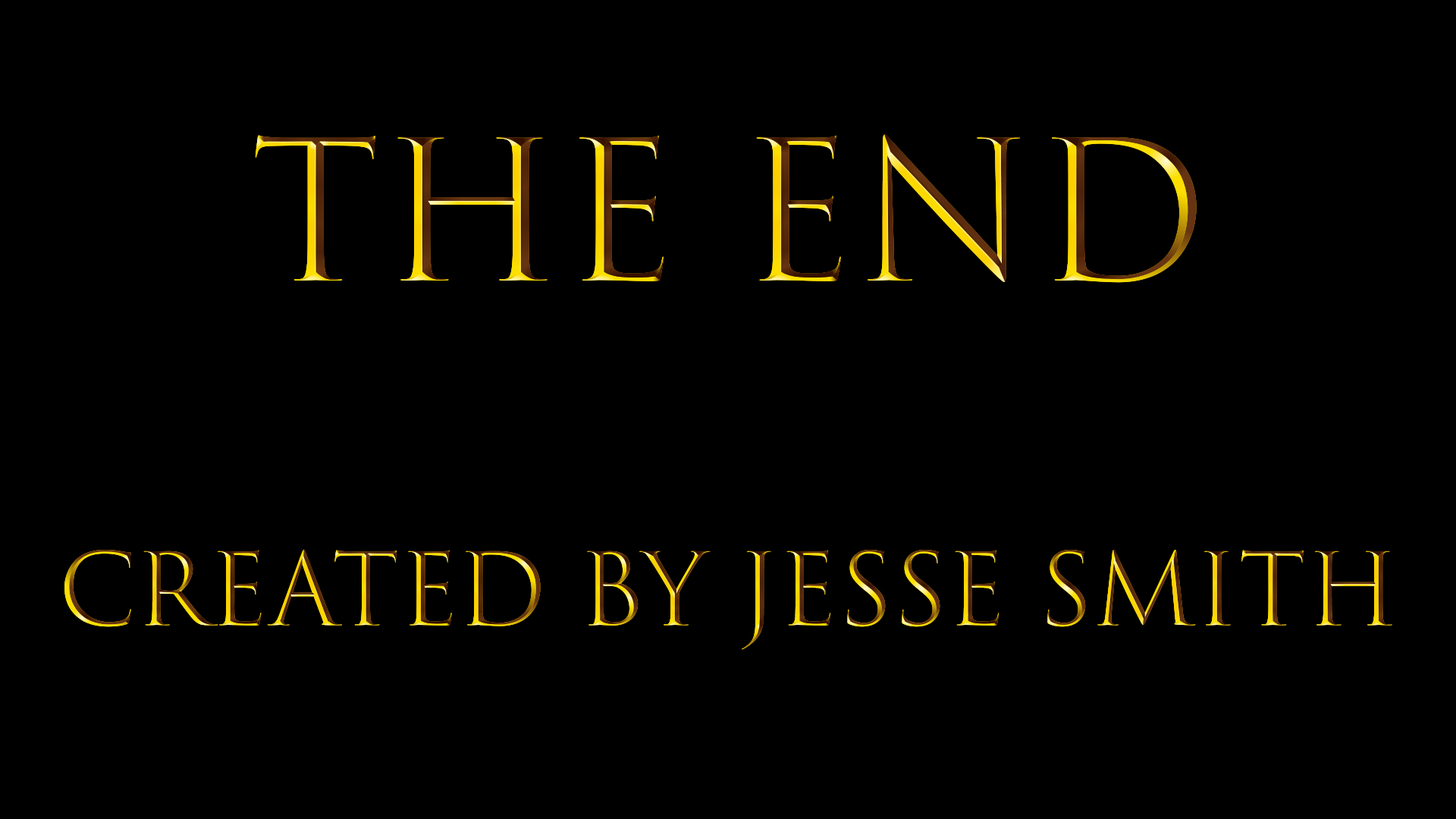
<style>
.page{position:relative;width:1456px;height:819px;background:#000000}
.page>*{position:absolute;margin:0}
.t1{font:97.8px "TrajanColor-Concept"}
.t2{font:189.6px "TrajanColor-Concept"}
</style>
<div class="page">
<p class="t1" style="left:64px;top:134px;width:1328px;height:516px;text-align:center"><span class="t2">The End<br><br></span>Created by Jesse Smith</p>
</div>
